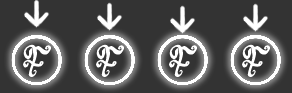
<style>
.page{position:relative;width:292px;height:93px;background:#333333}
.page>*{position:absolute;margin:0}
.t1{font:44.4px "WineTasting";color:#ffffff}
</style>
<div class="page">
<p class="t1" style="left:23px;top:44px;width:28px;height:33px">F</p>
<p class="t1" style="left:96px;top:44px;width:28px;height:33px">F</p>
<p class="t1" style="left:169px;top:44px;width:28px;height:33px">F</p>
<p class="t1" style="left:242px;top:44px;width:28px;height:33px">F</p>
</div>
